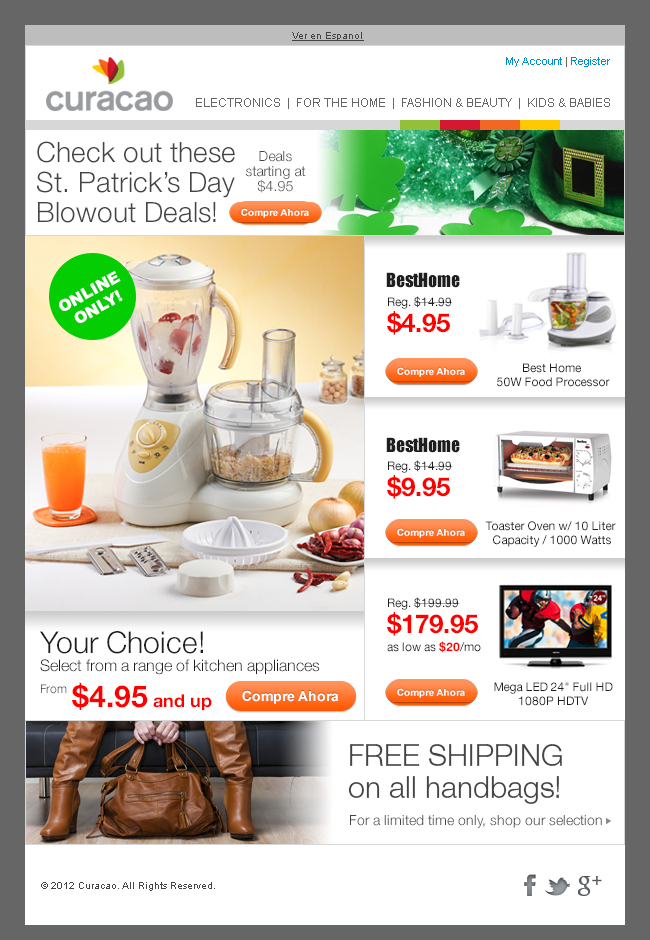
<style>
.page{position:relative;width:650px;height:940px;background:#ffffff}
.page>*{position:absolute;margin:0}
.t1{font:10px "ArialMT";color:#444444;text-decoration:underline}
.t2{font:11px "ArialMT";color:#008ecf}
.t3{font:11px "ArialMT";color:#666666}
.t4{font:12px "ArialMT";color:#666666}
.t5{font:28px/30px "HelveticaNeue-Light";color:#444444}
.t6{font:14px/15px "HelveticaNeue-Light";color:#444444}
.t7{font:11px "Arial-BoldMT"}
.t8{font:16px/18px "Arial-Black";color:#ffffff}
.t9{font:18px "Impact";color:#1e1e1e}
.t10{font:12px/18px "HelveticaNeue-Roman";color:#1e1e1e}
.t11{font:26px/26px "HelveticaNeue-Bold";color:#ff0000}
.t12{font:12px/14px "HelveticaNeue-Roman";color:#1e1e1e}
.t13{font:12px/18px "HelveticaNeue-Bold";color:#ff0000}
.t14{font:16px/18px "HelveticaNeue-Light";color:#1e1e1e}
.t15{font:30px/18px "HelveticaNeue-Light";color:#1e1e1e}
.t16{font:12px/22px "HelveticaNeue-Light";color:#1e1e1e}
.t17{font:18px "HelveticaNeue-Bold";color:#ff0000}
.t18{font:30px "HelveticaNeue-Bold";color:#ff0000}
.t19{font:30px/32px "HelveticaNeue-Light";color:#444444}
.t20{font:14px "HelveticaNeue-Light";color:#444444}
.t21{font:10px "ArialMT";color:#444444}
</style>
<div class="page">
<p class="t1" style="left:292px;top:32px;width:72px;height:9px">Ver en Espanol</p>
<p class="t2" style="left:506px;top:57px;width:104px;height:10px">My Account<span class="t3"> | </span>Register</p>
<p class="t4" style="left:196px;top:98px;width:414px;height:11px">ELECTRONICS  |  FOR THE HOME  |  FASHION &amp; BEAUTY  |  KIDS &amp; BABIES</p>
<p class="t5" style="left:37px;top:141px;width:198px;height:82px">Check out these <br>St. Patrick’s Day <br>Blowout Deals!</p>
<p class="t6" style="left:245px;top:151px;width:61px;height:42px;text-align:center">Deals<br>starting at<br>$4.95</p>
<p class="t7" style="left:248px;top:209px;width:55px;height:11px">Shop Now</p>
<p class="t8" style="left:59px;top:271px;width:64px;height:52px;text-align:center;rotate:-29deg">ONLINE<br>ONLY!</p>
<p class="t9" style="left:386px;top:272px;width:74px;height:16px">BestHome</p>
<p class="t10" style="left:387px;top:296px;width:66px;height:39px">Reg. $14.99<br><span class="t11">$4.95</span></p>
<p class="t12" style="left:497px;top:363px;width:113px;height:24px;text-align:center">Best Home <br>50W Food Processor</p>
<p class="t9" style="left:386px;top:437px;width:74px;height:16px">BestHome</p>
<p class="t10" style="left:387px;top:460px;width:66px;height:39px">Reg. $14.99<br><span class="t11">$9.95</span></p>
<p class="t12" style="left:485px;top:521px;width:131px;height:26px;text-align:center">Toaster Oven w/ 10 Liter <br>Capacity / 1000 Watts</p>
<p class="t10" style="left:387px;top:597px;width:94px;height:56px">Reg. $199.99<br><span class="t11">$179.95<br></span>as low as <span class="t13">$20</span>/mo</p>
<p class="t14" style="left:39px;top:631px;width:281px;height:63px"><span class="t15">Your Choice!<br></span>Select from a range of kitchen appliances <br><span class="t16">From</span></p>
<p class="t17" style="left:72px;top:682px;width:140px;height:29px"><span class="t18">$4.95</span> and up</p>
<p class="t12" style="left:494px;top:682px;width:119px;height:24px;text-align:center">Mega LED 24" Full HD<br>1080P HDTV</p>
<p class="t19" style="left:348px;top:744px;width:214px;height:60px">FREE SHIPPING<br>on all handbags!</p>
<p class="t20" style="left:350px;top:815px;width:252px;height:13px">For a limited time only, shop our selection</p>
<p class="t21" style="left:41px;top:882px;width:174px;height:9px">© 2012 Curacao. All Rights Reserved.</p>
</div>
